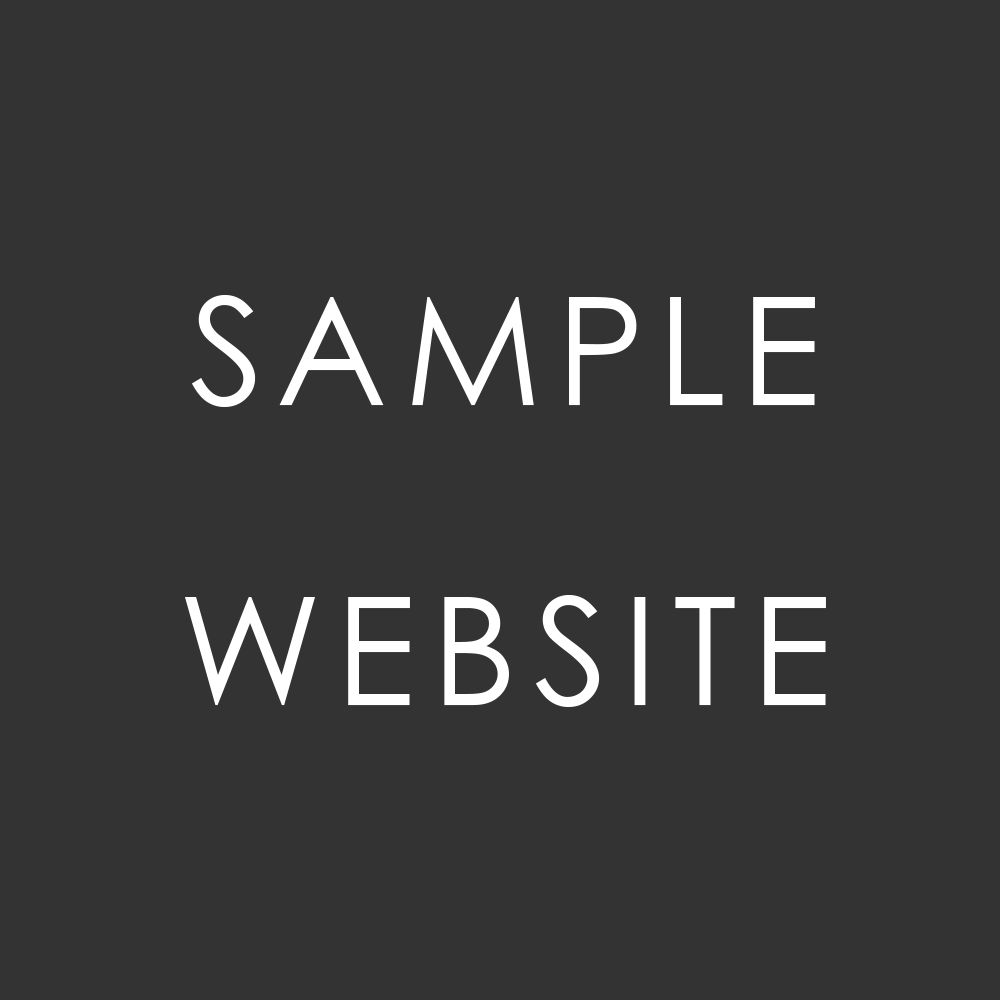
<style>
.page{position:relative;width:1000px;height:1000px;background:#333333}
.page>*{position:absolute;margin:0}
.t1{font:150px/300px "CenturyGothic";letter-spacing:0.1em;color:#ffffff}
</style>
<div class="page">
<p class="t1" style="left:184px;top:295px;width:642px;height:412px;text-align:center">SAMPLE<br>WEBSITE</p>
</div>
